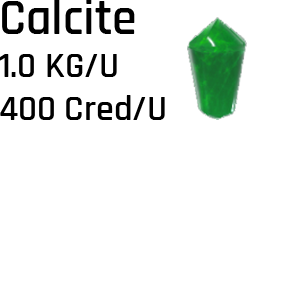
<style>
.page{position:relative;width:300px;height:283px;background:#ffffff}
.page>*{position:absolute;margin:0}
.t1{font:36px "Rajdhani-SemiBold";color:#000000}
.t2{font:50px "Rajdhani-SemiBold";color:#000000}
</style>
<div class="page">
<p class="t1" style="left:0px;top:0px;width:165px;height:120px"><span class="t2">Calcite<br></span>1.0 KG/U<br>400 Cred/U</p>
</div>
